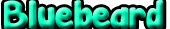
<style>
.page{position:relative;width:170px;height:29px;background:#000000}
.page>*{position:absolute;margin:0}
.t1{font:36px "JandaManateeSolid"}
</style>
<div class="page">
<p class="t1" style="left:4px;top:0px;width:160px;height:30px">Bluebeard</p>
</div>
